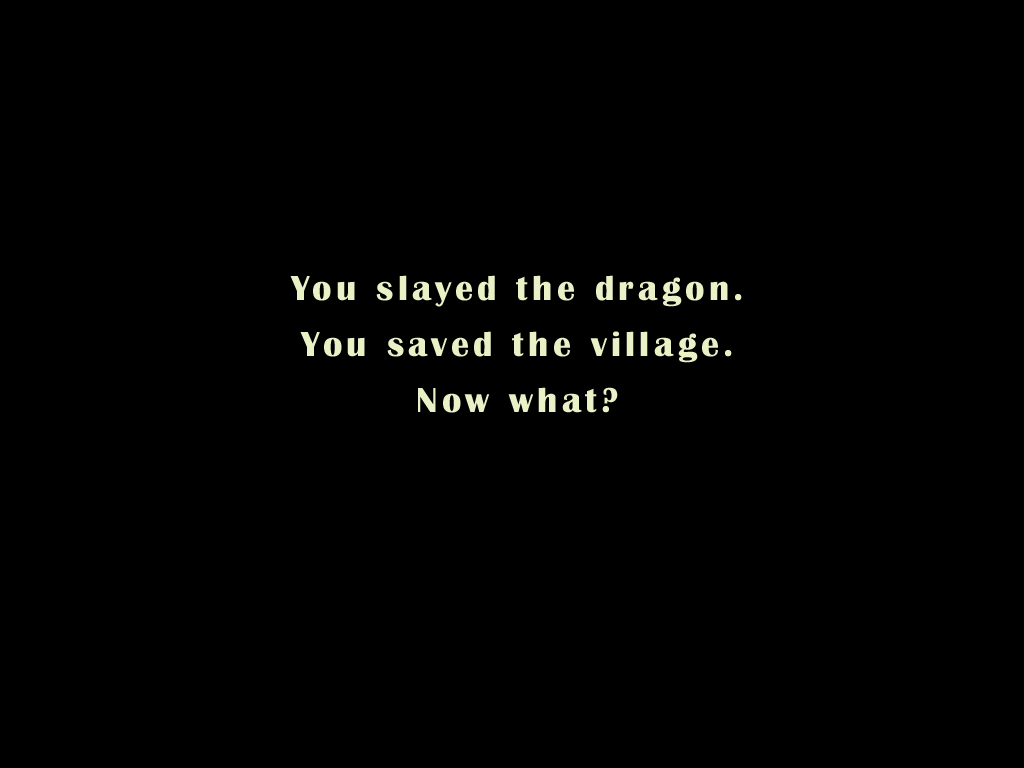
<style>
.page{position:relative;width:1024px;height:768px;background:#000000}
.page>*{position:absolute;margin:0}
.t1{font:36px/18.7px "BritannicBold";letter-spacing:0.125em;color:#ebf1c6}
</style>
<div class="page">
<p class="t1" style="left:290px;top:275px;width:452px;height:138px;text-align:center">You slayed the dragon.<br><br><br>You saved the village.<br><br><br>Now what?</p>
</div>
